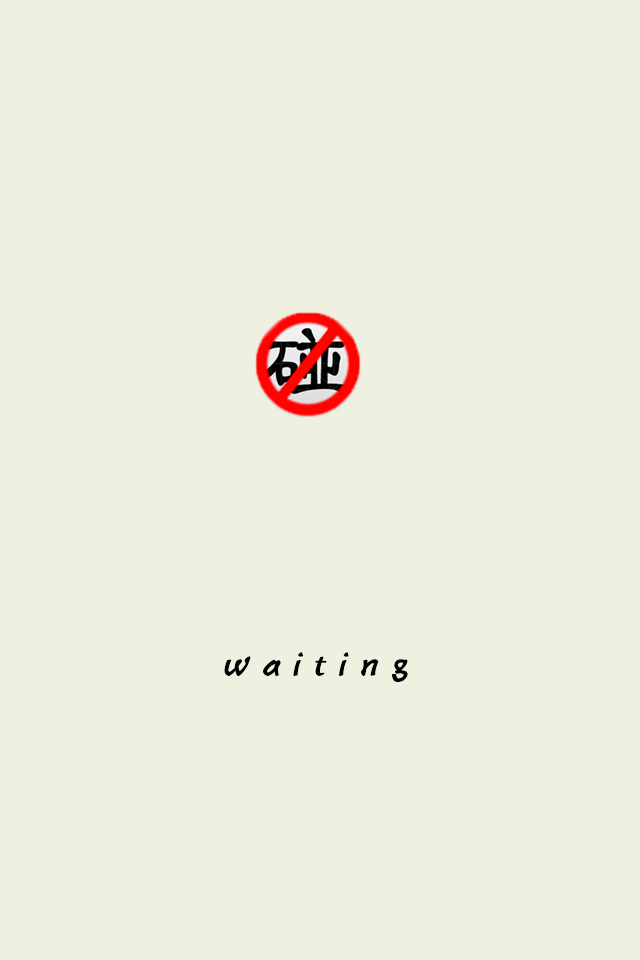
<style>
.page{position:relative;width:640px;height:960px;background:#eff1e0}
.page>*{position:absolute;margin:0}
.t1{font:40px "STLibian-SC-Regular";letter-spacing:0.24em;color:#000000;font-weight:bold}
</style>
<div class="page">
<p class="t1" style="left:224px;top:652px;width:184px;height:30px">waiting</p>
</div>
